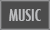
<style>
.page{position:relative;width:50px;height:30px;background:#4c4c4c}
.page>*{position:absolute;margin:0}
.t1{font:16px "FuturaCondensed";color:#bebfc1}
</style>
<div class="page">
<p class="t1" style="left:9px;top:9px;width:32px;height:12px">MUSIC</p>
</div>
